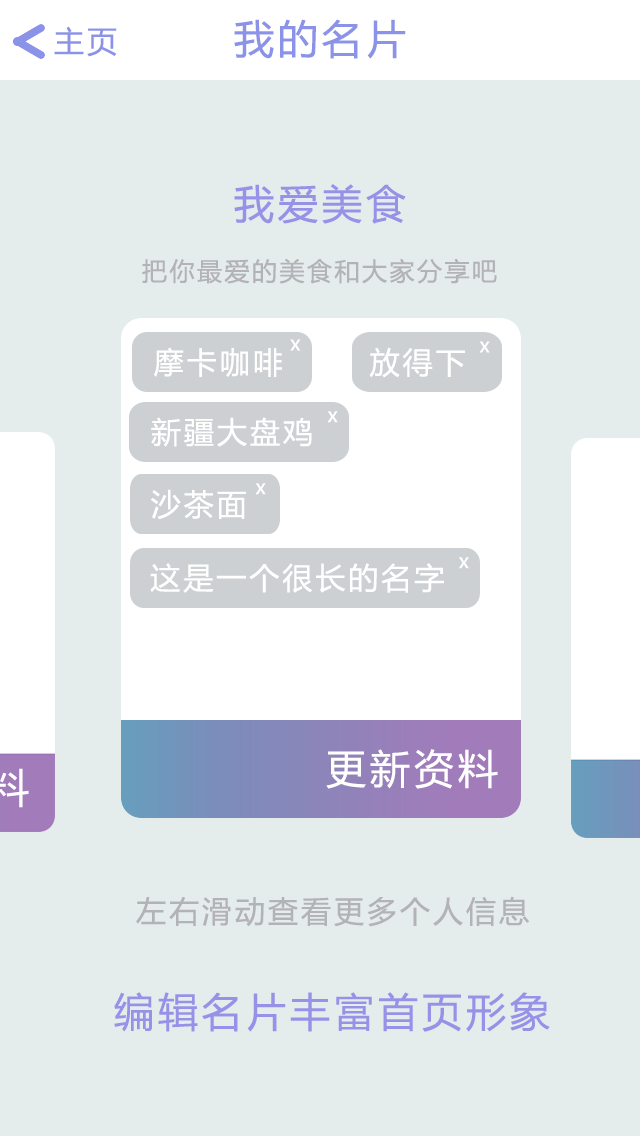
<style>
.page{position:relative;width:640px;height:1136px;background:#e4ecec}
.page>*{position:absolute;margin:0}
.t1{font:30px "MicrosoftYaHei";letter-spacing:0.1em;color:#8b93e8}
.t2{font:40px "MicrosoftYaHei";letter-spacing:0.1em;color:#8b93e8}
.t3{font:40px "MicrosoftYaHei";letter-spacing:0.1em;color:#9991e8}
.t4{font:25px "MicrosoftYaHei";letter-spacing:0.1em;color:#b2b2b7}
.t5{font:20px "MicrosoftYaHei";letter-spacing:0.1em;color:#ffffff}
.t6{font:30px "MicrosoftYaHei";letter-spacing:0.1em;color:#ffffff}
.t7{font:40px "MicrosoftYaHei";letter-spacing:0.1em;color:#ffffff}
.t8{font:30px "MicrosoftYaHei";letter-spacing:0.1em;color:#b2b2b7}
</style>
<div class="page">
<p class="t1" style="left:54px;top:26px;width:63px;height:31px">主页</p>
<p class="t2" style="left:234px;top:19px;width:172px;height:40px">我的名片</p>
<p class="t3" style="left:234px;top:184px;width:172px;height:40px">我爱美食</p>
<p class="t4" style="left:142px;top:258px;width:355px;height:26px">把你最爱的美食和大家分享吧</p>
<p class="t5" style="left:290px;top:339px;width:11px;height:12px">x</p>
<p class="t5" style="left:479px;top:341px;width:11px;height:12px">x</p>
<p class="t6" style="left:154px;top:347px;width:128px;height:30px">摩卡咖啡</p>
<p class="t6" style="left:369px;top:347px;width:96px;height:31px">放得下</p>
<p class="t5" style="left:327px;top:411px;width:11px;height:12px">x</p>
<p class="t6" style="left:151px;top:417px;width:161px;height:30px">新疆大盘鸡</p>
<p class="t5" style="left:255px;top:483px;width:11px;height:12px">x</p>
<p class="t6" style="left:151px;top:489px;width:95px;height:31px">沙茶面</p>
<p class="t5" style="left:459px;top:557px;width:10px;height:12px">x</p>
<p class="t6" style="left:150px;top:563px;width:294px;height:30px">这是一个很长的名字</p>
<p class="t7" style="left:326px;top:749px;width:172px;height:40px">更新资料</p>
<p class="t8" style="left:136px;top:896px;width:393px;height:31px">左右滑动查看更多个人信息</p>
<p class="t3" style="left:114px;top:992px;width:436px;height:40px">编辑名片丰富首页形象</p>
</div>
